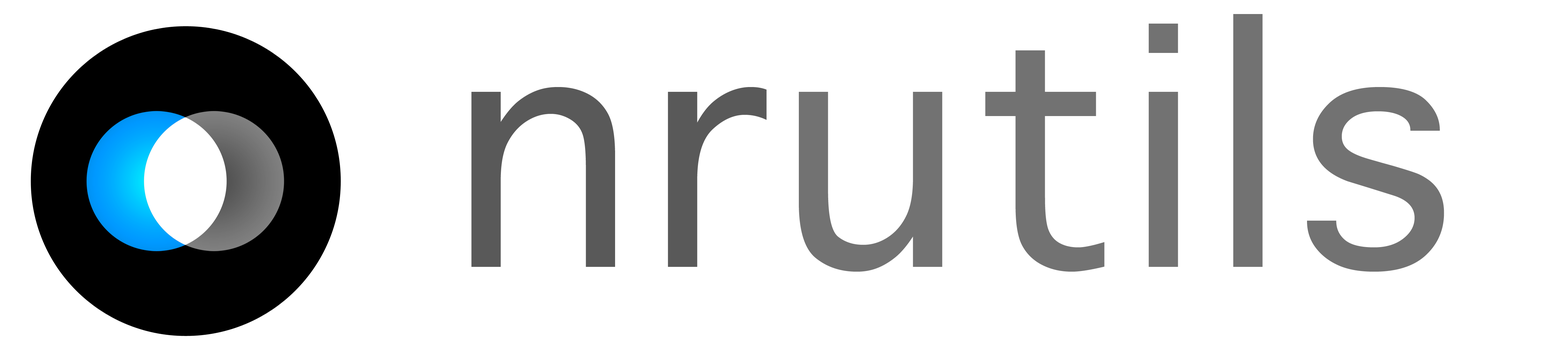
<style>
.page{position:relative;width:1568px;height:359px;background:#ffffff}
.page>*{position:absolute;margin:0}
.t1{font:452.3px "AppleSymbols";letter-spacing:0.02em;color:#727272}
.t2{font:452.3px "AppleSymbols";letter-spacing:0.02em;color:#595959}
</style>
<div class="page">
<p class="t1" style="left:471px;top:14px;width:973px;height:258px"><span class="t2">nr</span>utils</p>
</div>
